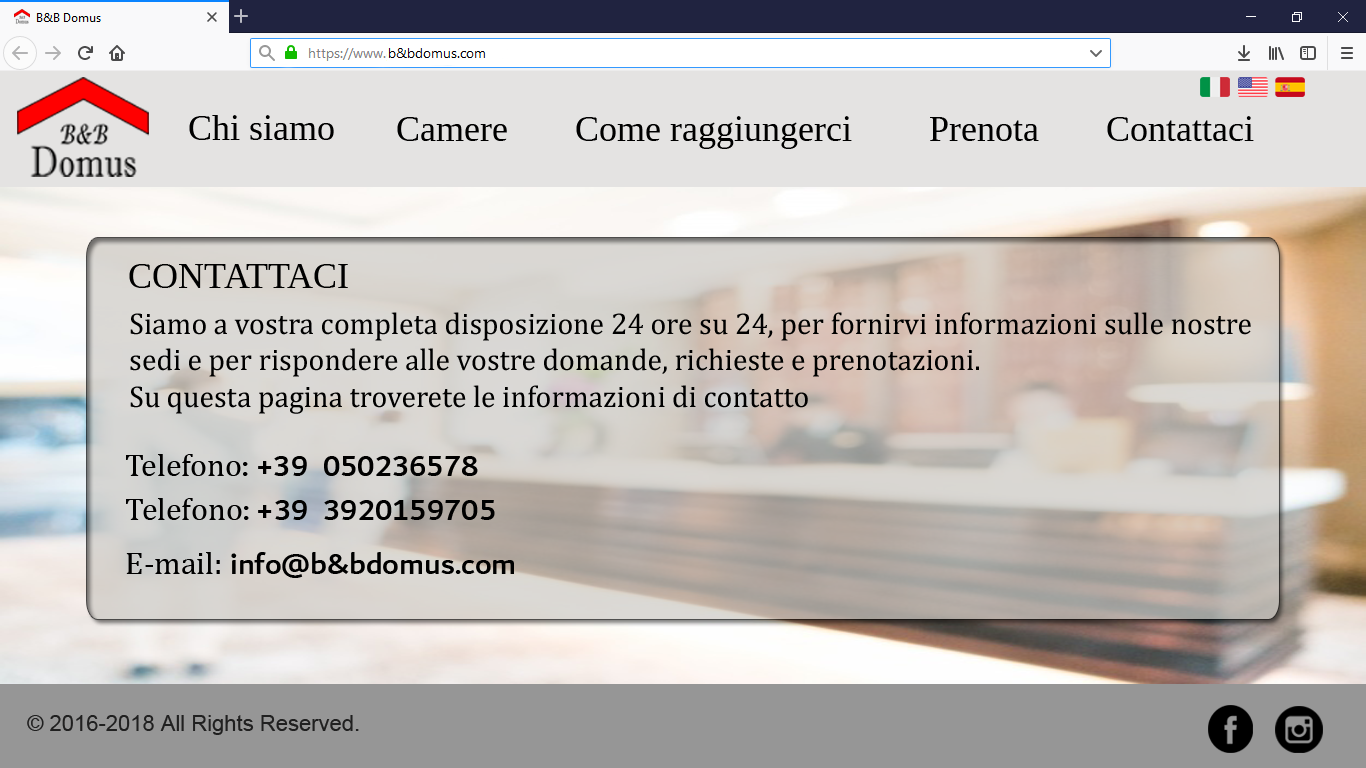
<style>
.page{position:relative;width:1366px;height:768px}
.page>*{position:absolute;margin:0}
.t1{font:36px "Tinos-Regular";color:#000000}
.t2{font:30.4px "CambriaMath";color:#000000}
.t3{font:32px "Dubai-Medium";color:#000000}
.t4{font:32px "CambriaMath";color:#000000}
.t5{font:22px "ArialMT";color:#373636}
</style>
<div class="page">
<p class="t1" style="left:189px;top:115px;width:145px;height:25px">Chi siamo</p>
<p class="t1" style="left:397px;top:117px;width:110px;height:24px">Camere</p>
<p class="t1" style="left:576px;top:116px;width:276px;height:33px">Come raggiungerci</p>
<p class="t1" style="left:930px;top:117px;width:109px;height:24px">Prenota</p>
<p class="t1" style="left:1107px;top:116px;width:147px;height:25px">Contattaci</p>
<p class="t1" style="left:129px;top:264px;width:219px;height:24px">CONTATTACI</p>
<p class="t2" style="left:130px;top:312px;width:1121px;height:102px">Siamo a vostra completa disposizione 24 ore su 24, per fornirvi informazioni sulle nostre sedi e per rispondere alle vostre domande, richieste e prenotazioni. <br>Su questa pagina troverete le informazioni di contatto</p>
<p class="t3" style="left:126px;top:454px;width:352px;height:22px"><span class="t4">Telefono</span>: +39  050236578</p>
<p class="t3" style="left:126px;top:498px;width:369px;height:22px"><span class="t4">Telefono</span>: +39  3920159705</p>
<p class="t3" style="left:126px;top:552px;width:388px;height:26px"><span class="t4">E-mail:</span> info@b&amp;bdomus.com</p>
<p class="t5" style="left:27px;top:715px;width:332px;height:20px">© 2016-2018 All Rights Reserved.</p>
</div>
